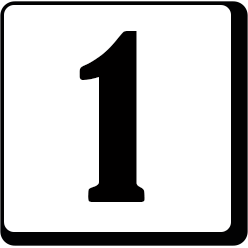
<style>
.page{position:relative;width:248px;height:248px;background:#ffffff}
.page>*{position:absolute;margin:0}
.t1{font:216px "BernardMT-Condensed";color:#010000}
</style>
<div class="page">
<p class="t1" style="left:79px;top:31px;width:66px;height:171px">1</p>
</div>
